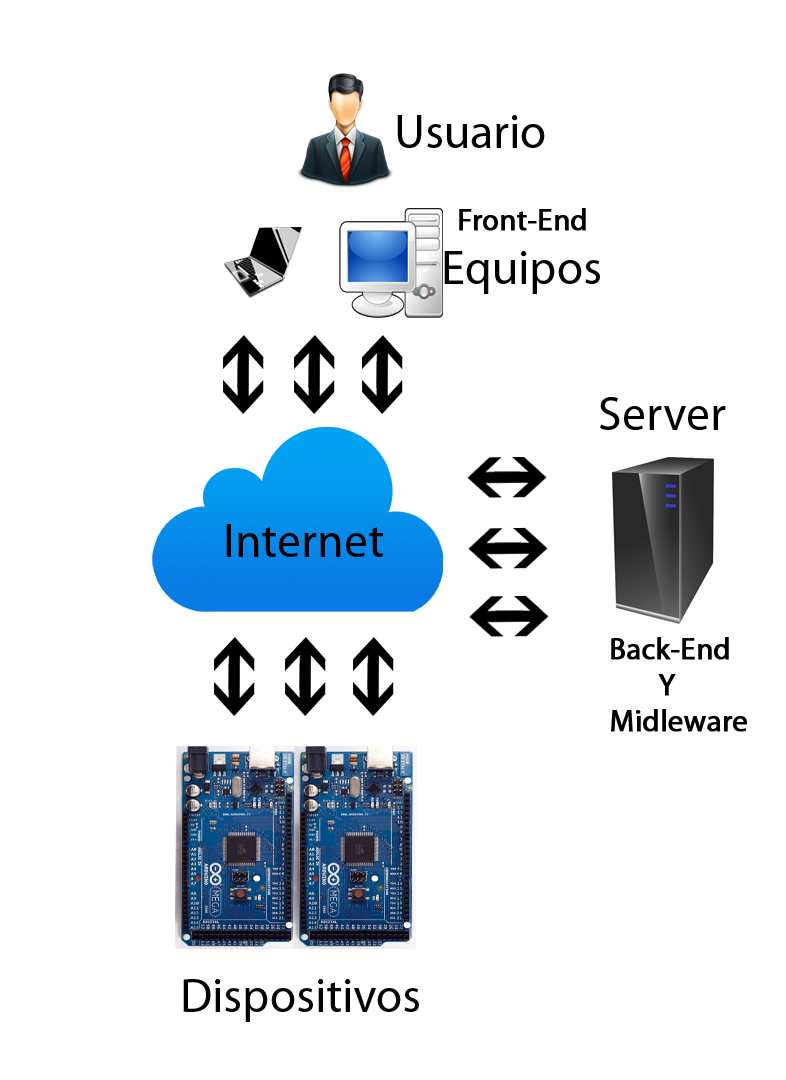
<style>
.page{position:relative;width:786px;height:1080px;background:#ffffff}
.page>*{position:absolute;margin:0}
.t1{font:48px "MyriadPro-Regular";color:#000000}
.t2{font:30px "MyriadPro-Regular";color:#000000;font-weight:bold}
</style>
<div class="page">
<p class="t1" style="left:397px;top:115px;width:148px;height:33px">Usuario</p>
<p class="t2" style="left:459px;top:208px;width:127px;height:23px">Front-End</p>
<p class="t1" style="left:444px;top:251px;width:156px;height:43px">Equipos</p>
<p class="t1" style="left:600px;top:397px;width:126px;height:33px">Server</p>
<p class="t1" style="left:226px;top:524px;width:157px;height:33px">Internet</p>
<p class="t2" style="left:611px;top:637px;width:136px;height:95px">Back-End<br>   Y<br>Midleware</p>
<p class="t1" style="left:183px;top:979px;width:236px;height:43px">Dispositivos</p>
</div>
